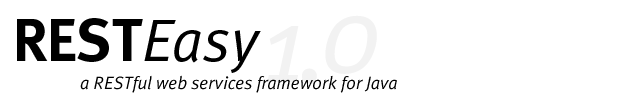
<style>
.page{position:relative;width:618px;height:110px;background:#ffffff}
.page>*{position:absolute;margin:0}
.t1{font:60px "Meta-Bold";color:#000000}
.t2{font:60px "MetaPlusNormal-Italic";color:#000000}
.t3{font:18px "MetaPlusNormal-Italic";color:#000000}
</style>
<div class="page">
<p class="t1" style="left:17px;top:18px;width:244px;height:55px">REST<span class="t2">Easy</span></p>
<p class="t3" style="left:80px;top:75px;width:317px;height:18px">a RESTful web services framework for Java</p>
</div>
